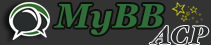
<style>
.page{position:relative;width:211px;height:45px;background:#333333}
.page>*{position:absolute;margin:0}
.t1{font:33.8px "Georgia-BoldItalic";color:#2d6f37}
</style>
<div class="page">
<p class="t1" style="left:53px;top:4px;width:111px;height:31px">MyBB</p>
</div>
